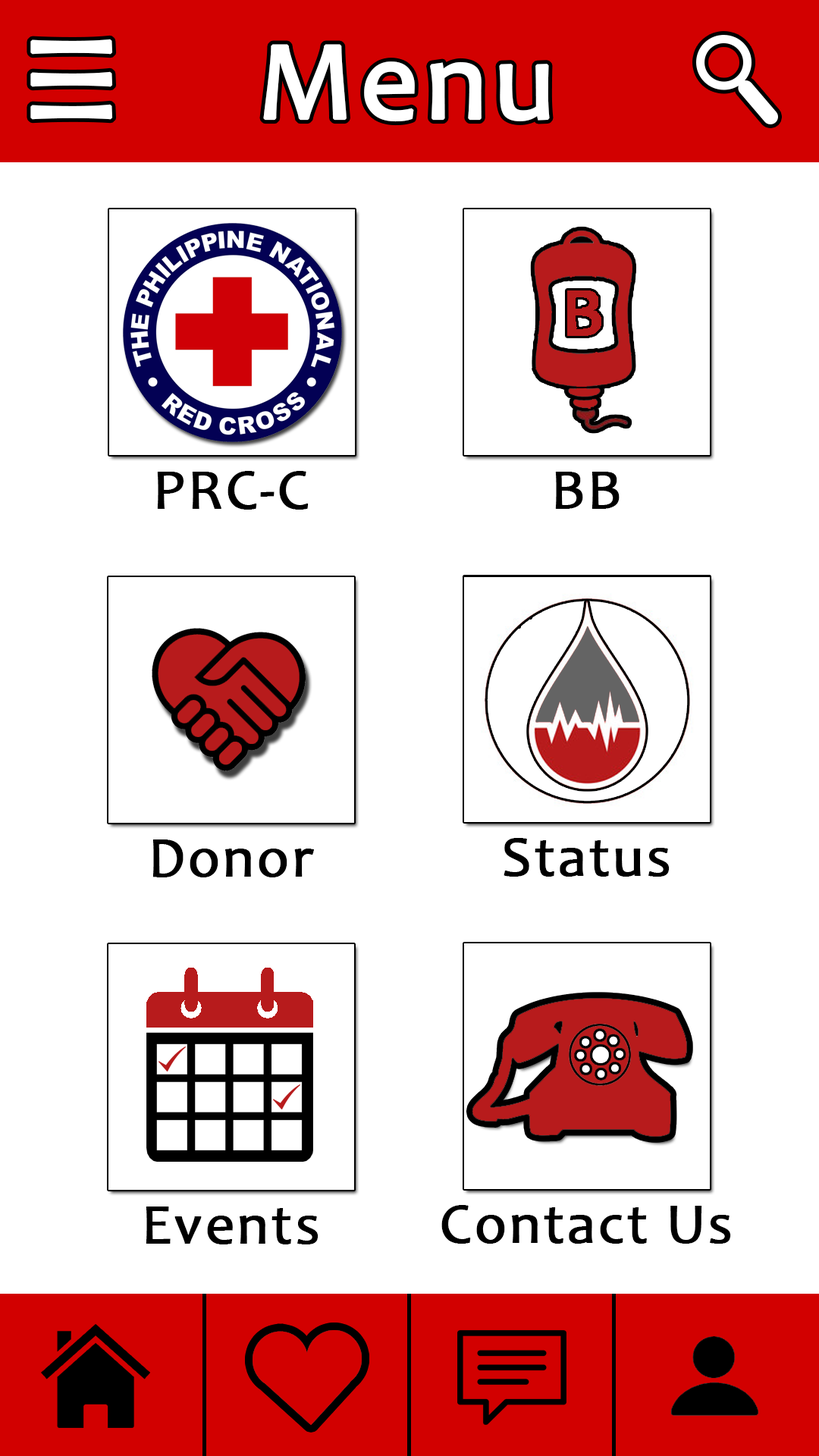
<style>
.page{position:relative;width:819px;height:1456px;background:#ffffff}
.page>*{position:absolute;margin:0}
.t1{font:113.4px "Candara";letter-spacing:0.03em;color:#ffffff;font-weight:bold}
.t2{font:56.9px "Candara";letter-spacing:0.03em;color:#000000;font-weight:bold}
</style>
<div class="page">
<p class="t1" style="left:30px;top:39px;width:83px;height:81px;rotate:90deg">lll</p>
<p class="t1" style="left:263px;top:44px;width:287px;height:78px">Menu</p>
<p class="t2" style="left:157px;top:471px;width:152px;height:39px">PRC-C</p>
<p class="t2" style="left:555px;top:472px;width:65px;height:37px">BB</p>
<p class="t2" style="left:152px;top:839px;width:162px;height:38px">Donor</p>
<p class="t2" style="left:504px;top:838px;width:166px;height:39px">Status</p>
<p class="t2" style="left:441px;top:1205px;width:290px;height:39px">Contact Us</p>
<p class="t2" style="left:146px;top:1206px;width:172px;height:38px">Events</p>
</div>
